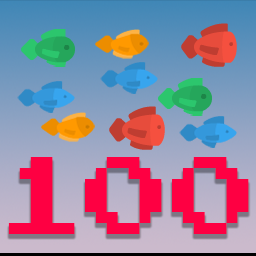
<style>
.page{position:relative;width:256px;height:256px}
.page>*{position:absolute;margin:0}
.t1{font:87.2px "PressStart2P-Regular";color:#fe0042}
</style>
<div class="page">
<p class="t1" style="left:8px;top:157px;width:241px;height:77px">100</p>
</div>
